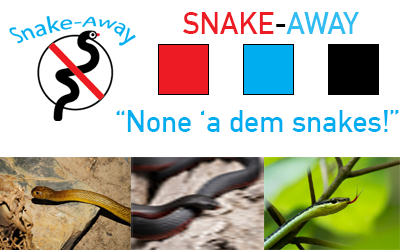
<style>
.page{position:relative;width:400px;height:250px;background:#ffffff}
.page>*{position:absolute;margin:0}
.t1{font:30px "DINAlternate-Bold";color:#ed1c24}
.t2{font:30px "DINAlternate-Bold";color:#30bdf2}
.t3{font:30px "DINAlternate-Bold";color:#000000}
.t4{font:30px "DINAlternate-Bold";color:#00aeef}
</style>
<div class="page">
<p class="t1" style="left:183px;top:12px;width:91px;height:22px">SNAKE</p>
<p class="t2" style="left:276px;top:12px;width:83px;height:22px"><span class="t3">-</span>AWAY</p>
<p class="t4" style="left:116px;top:110px;width:283px;height:22px">“None ‘a dem snakes!”</p>
</div>
